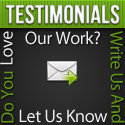
<style>
.page{position:relative;width:125px;height:125px}
.page>*{position:absolute;margin:0}
.t1{font:26px "BebasNeue";letter-spacing:-0.02em;font-weight:bold}
.t2{font:18px "MyriadPro-Regular";letter-spacing:-0.02em;color:#eeeeee}
.t3{font:18px "MyriadPro-Regular";letter-spacing:-0.025em;color:#629617}
.t4{font:18px "MyriadPro-Regular";letter-spacing:-0.02em;color:#629617}
</style>
<div class="page">
<p class="t1" style="left:5px;top:4px;width:115px;height:20px">Testimonials</p>
<p class="t2" style="left:0px;top:31px;width:13px;height:34px;rotate:-90deg">Love</p>
<p class="t2" style="left:25px;top:31px;width:75px;height:14px">Our Work?</p>
<p class="t3" style="left:110px;top:31px;width:15px;height:92px;rotate:89deg">Write Us And</p>
<p class="t4" style="left:1px;top:71px;width:13px;height:52px;rotate:-91deg">Do You</p>
<p class="t2" style="left:19px;top:109px;width:89px;height:14px">Let Us Know</p>
</div>
